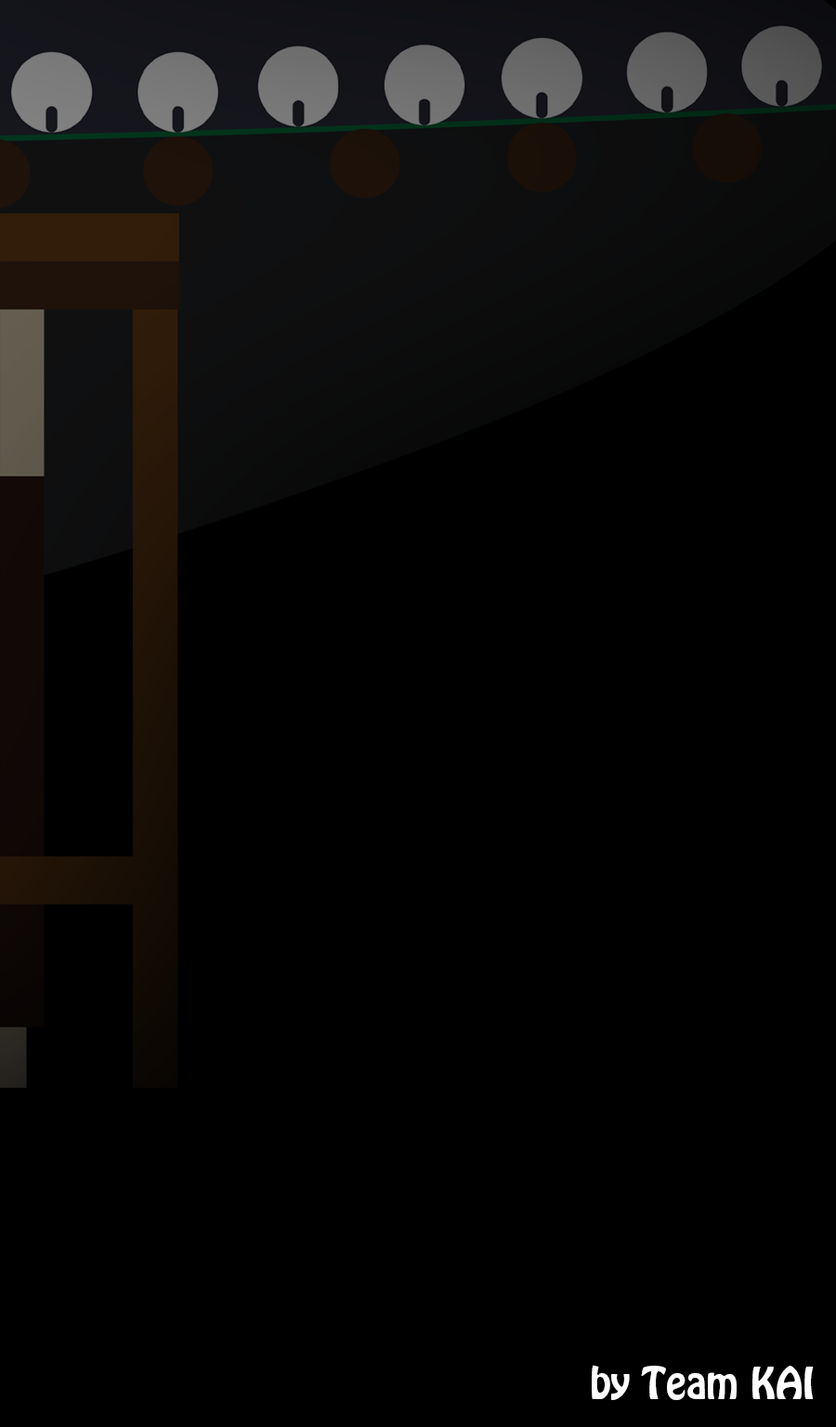
<style>
.page{position:relative;width:836px;height:1427px;background:#000000}
.page>*{position:absolute;margin:0}
.t1{font:38.7px "HoboStd";color:#ffffff}
</style>
<div class="page">
<p class="t1" style="left:592px;top:1364px;width:222px;height:36px">by Team KAI</p>
</div>
